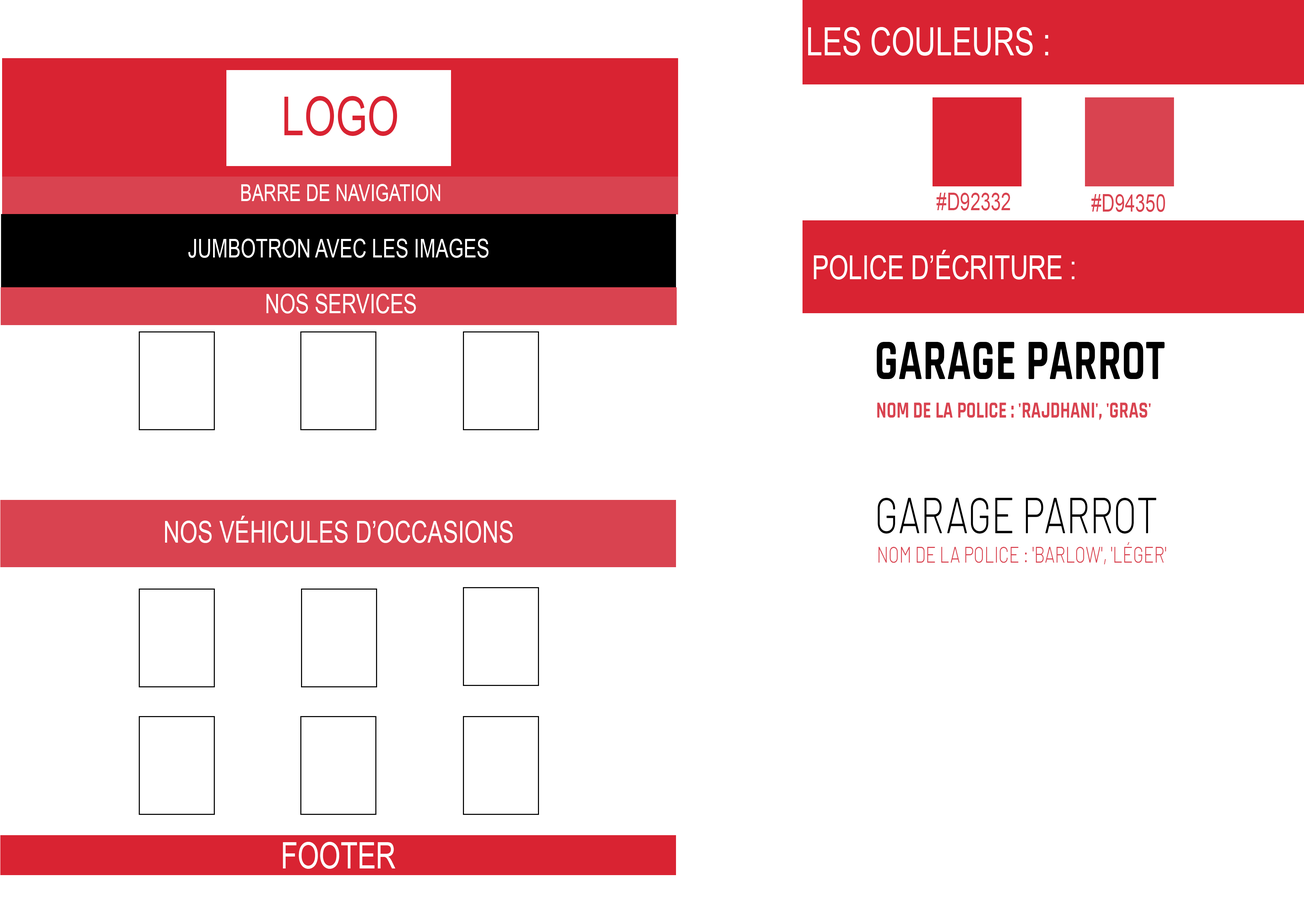
<style>
.page{position:relative;width:1304px;height:914px;background:#ffffff}
.page>*{position:absolute;margin:0}
.t1{font:39px "ArialMT";color:#ffffff;text-transform:uppercase;scale:0.76 1}
.t2{font:53.5px "ArialMT";color:#d92332;text-transform:uppercase;scale:0.76 1}
.t3{font:23.3px "ArialMT";color:#ffffff;text-transform:uppercase;scale:0.76 1}
.t4{font:24.3px "ArialMT";color:#d94350;text-transform:uppercase;scale:0.76 1}
.t5{font:25.6px "ArialMT";color:#ffffff;text-transform:uppercase;scale:0.76 1}
.t6{font:33px "ArialMT";color:#ffffff;text-transform:uppercase;scale:0.76 1}
.t7{font:26.8px "ArialMT";color:#ffffff;text-transform:uppercase;scale:0.76 1}
.t8{font:57.8px "Rajdhani-Bold";color:#000000;text-transform:uppercase;scale:0.76 1}
.t9{font:23.3px "Rajdhani-Bold";color:#d94350;text-transform:uppercase;scale:0.76 1}
.t10{font:50.2px "Barlow-Light";color:#000000;text-transform:uppercase;scale:0.76 1}
.t11{font:30.1px "ArialMT";color:#ffffff;text-transform:uppercase;scale:0.76 1}
.t12{font:22.6px "Barlow-Light";color:#d94350;text-transform:uppercase;scale:0.76 1}
.t13{font:36.3px "ArialMT";color:#ffffff;text-transform:uppercase;scale:0.76 1}
</style>
<div class="page">
<p class="t1" style="left:808px;top:27px;width:240px;height:29px">Les couleurs :</p>
<p class="t2" style="left:284px;top:96px;width:113px;height:40px">Logo</p>
<p class="t3" style="left:241px;top:184px;width:199px;height:18px">Barre de navigation</p>
<p class="t4" style="left:936px;top:193px;width:74px;height:18px">#d92332</p>
<p class="t4" style="left:1091px;top:194px;width:74px;height:18px">#d94350</p>
<p class="t5" style="left:188px;top:239px;width:301px;height:19px">Jumbotron avec les images</p>
<p class="t6" style="left:814px;top:250px;width:261px;height:30px">Police d’écriture :</p>
<p class="t7" style="left:266px;top:294px;width:150px;height:20px">Nos services</p>
<p class="t8" style="left:877px;top:342px;width:288px;height:37px">Garage parrot</p>
<p class="t9" style="left:877px;top:403px;width:274px;height:17px">Nom de la police : 'Rajdhani', 'Gras'</p>
<p class="t10" style="left:878px;top:498px;width:279px;height:36px">Garage Parrot</p>
<p class="t11" style="left:165px;top:516px;width:348px;height:27px">Nos véhicules d’occasions</p>
<p class="t12" style="left:879px;top:542px;width:287px;height:23px">Nom de la police : 'Barlow', 'Léger'</p>
<p class="t13" style="left:283px;top:842px;width:112px;height:27px">Footer</p>
</div>
